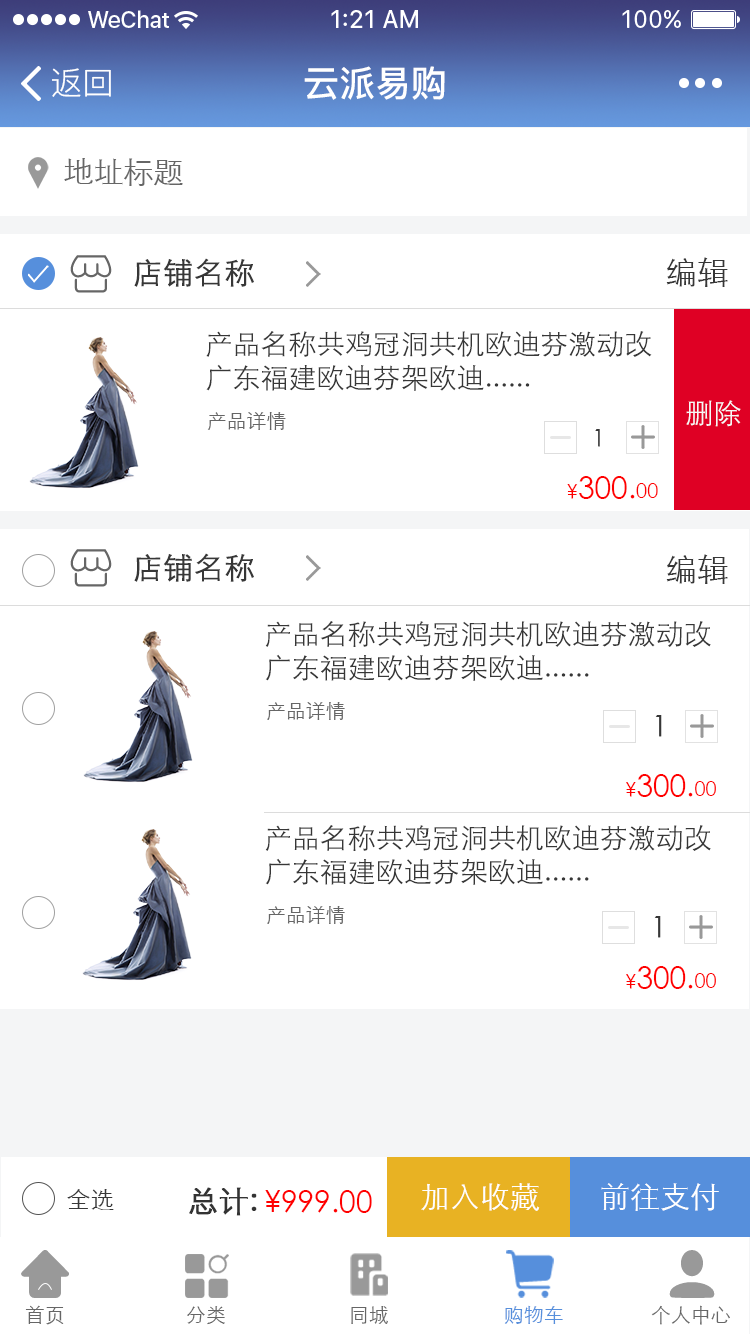
<style>
.page{position:relative;width:750px;height:1334px;background:#ffffff}
.page>*{position:absolute;margin:0}
.t1{font:32px "PingFang-SC-Regular";color:#ffffff}
.t2{font:36px "PingFang-SC-Bold";color:#ffffff}
.t3{font:30px "STXihei";color:#666666}
.t4{font:32px "STXihei";color:#373737}
.t5{font:30px "STXihei";color:#373737;font-weight:bold}
.t6{font:28px "STXihei";color:#373737}
.t7{font:28px "STXihei";color:#f7f7f7}
.t8{font:20px "STXihei";color:#666666}
.t9{font:24px "STXihei";color:#373737}
.t10{font:30px "STXihei";color:#ff0000}
.t11{font:20px "STXihei";color:#ff0000}
.t12{font:30px "STXihei";color:#373737}
.t13{font:30px "STXihei";color:#333333;font-weight:bold}
.t14{font:30px "STXihei";color:#ffffff}
.t15{font:20px "STXihei";color:#568fdc}
</style>
<div class="page">
<p class="t1" style="left:52px;top:68px;width:59px;height:29px">返回</p>
<p class="t2" style="left:304px;top:66px;width:141px;height:34px">云派易购</p>
<p class="t3" style="left:64px;top:158px;width:119px;height:28px">地址标题</p>
<p class="t4" style="left:666px;top:257px;width:62px;height:30px">编辑</p>
<p class="t5" style="left:134px;top:258px;width:120px;height:29px">店铺名称</p>
<p class="t6" style="left:206px;top:331px;width:446px;height:60px">产品名称共鸡冠洞共机欧迪芬激动改广东福建欧迪芬架欧迪......</p>
<p class="t7" style="left:686px;top:400px;width:55px;height:27px">删除</p>
<p class="t8" style="left:207px;top:412px;width:79px;height:18px">产品详情</p>
<p class="t9" style="left:595px;top:429px;width:5px;height:18px">1</p>
<p class="t10" style="left:567px;top:476px;width:91px;height:23px"><span class="t11">¥</span>300.<span class="t11">00</span></p>
<p class="t5" style="left:134px;top:553px;width:120px;height:29px">店铺名称</p>
<p class="t4" style="left:666px;top:554px;width:62px;height:30px">编辑</p>
<p class="t6" style="left:265px;top:621px;width:446px;height:60px">产品名称共鸡冠洞共机欧迪芬激动改广东福建欧迪芬架欧迪......</p>
<p class="t8" style="left:267px;top:702px;width:78px;height:18px">产品详情</p>
<p class="t12" style="left:655px;top:715px;width:7px;height:22px">1</p>
<p class="t10" style="left:626px;top:774px;width:90px;height:23px"><span class="t11">¥</span>300.<span class="t11">00</span></p>
<p class="t6" style="left:265px;top:825px;width:446px;height:60px">产品名称共鸡冠洞共机欧迪芬激动改广东福建欧迪芬架欧迪......</p>
<p class="t8" style="left:267px;top:906px;width:78px;height:18px">产品详情</p>
<p class="t12" style="left:654px;top:916px;width:7px;height:22px">1</p>
<p class="t10" style="left:626px;top:966px;width:90px;height:23px"><span class="t11">¥</span>300.<span class="t11">00</span></p>
<p class="t9" style="left:67px;top:1189px;width:47px;height:21px">全选</p>
<p class="t13" style="left:189px;top:1187px;width:68px;height:29px">总计:</p>
<p class="t10" style="left:265px;top:1190px;width:107px;height:23px">¥999.00</p>
<p class="t14" style="left:421px;top:1183px;width:119px;height:28px">加入收藏</p>
<p class="t14" style="left:601px;top:1183px;width:118px;height:28px">前往支付</p>
<p class="t8" style="left:25px;top:1305px;width:39px;height:20px">首页</p>
<p class="t8" style="left:187px;top:1306px;width:38px;height:19px">分类</p>
<p class="t8" style="left:351px;top:1306px;width:37px;height:18px">同城</p>
<p class="t15" style="left:504px;top:1305px;width:59px;height:19px">购物车</p>
<p class="t8" style="left:651px;top:1305px;width:79px;height:20px">个人中心</p>
</div>
